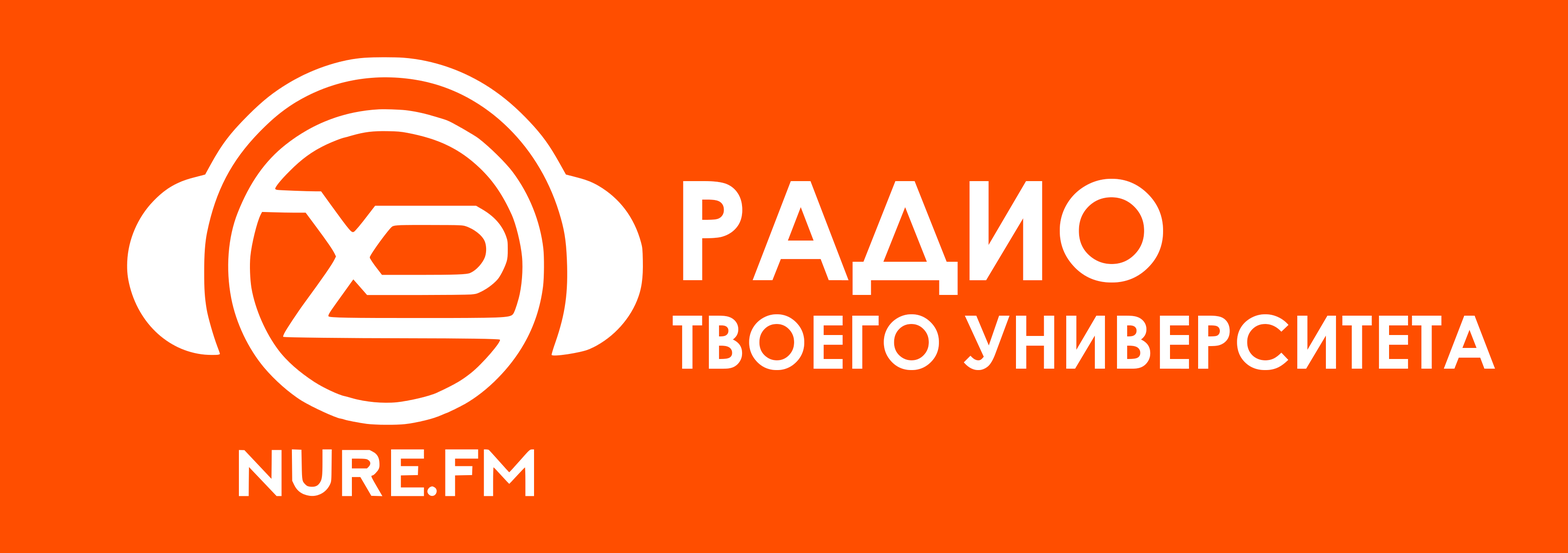
<style>
.page{position:relative;width:1568px;height:553px;background:#ff4e00}
.page>*{position:absolute;margin:0}
.t1{font:73.8px "CenturyGothic-Bold";color:#ffffff}
.t2{font:138.4px "CenturyGothic-Bold";color:#ffffff}
</style>
<div class="page">
<p class="t1" style="left:672px;top:179px;width:823px;height:191px"><span class="t2">РАДИО<br></span>ТВОЕГО УНИВЕРСИТЕТА</p>
</div>
